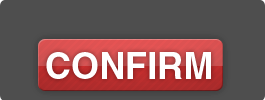
<style>
.page{position:relative;width:265px;height:100px;background:#4e4e4e}
.page>*{position:absolute;margin:0}
.t1{font:36px "Helvetica-Bold";color:#ffffff;text-transform:uppercase}
</style>
<div class="page">
<p class="t1" style="left:46px;top:52px;width:165px;height:27px">Confirm</p>
</div>
